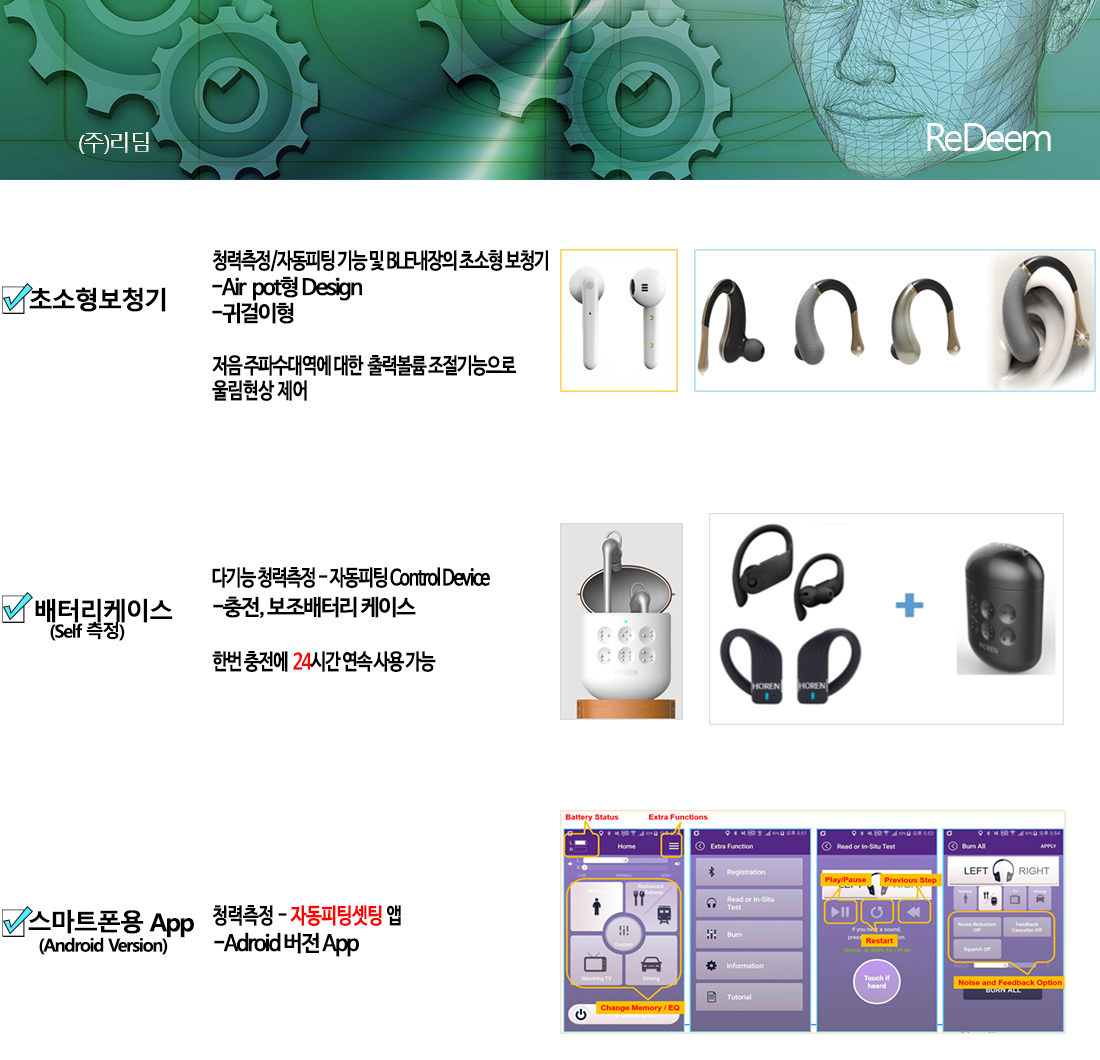
<style>
.page{position:relative;width:1100px;height:1060px;background:#ffffff}
.page>*{position:absolute;margin:0}
.t1{font:37.9px "MalgunGothic";letter-spacing:-0.075em;color:#fefefe}
.t2{font:22.3px "MalgunGothic";letter-spacing:-0.075em;color:#fefefe}
.t3{font:22px "NanumBarunGothicBold";letter-spacing:-0.075em;color:#000000;scale:0.81 1}
.t4{font:22px "NanumBarunGothicBold";letter-spacing:-0.075em;color:#000000}
.t5{font:25px "MalgunGothicBold";letter-spacing:-0.075em;color:#000000}
.t6{font:22px "NanumBarunGothicBold";letter-spacing:-0.025em;color:#000000;scale:0.81 1}
.t7{font:18px "MalgunGothicBold";letter-spacing:-0.075em;color:#000000}
.t8{font:22px "NanumBarunGothicBold";letter-spacing:-0.075em;color:#fc0505;scale:0.81 1}
.t9{font:22px "NanumBarunGothicBold";letter-spacing:-0.025em;color:#ff0101;scale:0.81 1}
</style>
<div class="page">
<p class="t1" style="left:927px;top:123px;width:124px;height:28px">ReDeem</p>
<p class="t2" style="left:79px;top:132px;width:70px;height:22px">(주)리딤</p>
<p class="t2" style="left:79px;top:132px;width:70px;height:22px">(주)리딤</p>
<p class="t3" style="left:212px;top:250px;width:336px;height:22px">청력측정/자동피팅 기능 및 BLE내장의 초소형 보청기</p>
<p class="t4" style="left:212px;top:276px;width:150px;height:25px">-Air  pot형 Design</p>
<p class="t5" style="left:29px;top:287px;width:137px;height:25px">초소형보청기</p>
<p class="t4" style="left:212px;top:302px;width:82px;height:22px">-귀걸이형</p>
<p class="t3" style="left:212px;top:355px;width:304px;height:21px">저음 주파수대역에 대한  출력볼륨 조절기능으로</p>
<p class="t6" style="left:212px;top:380px;width:95px;height:21px">울림현상 제어</p>
<p class="t3" style="left:212px;top:567px;width:278px;height:21px">다기능 청력측정 - 자동피팅 Control Device</p>
<p class="t5" style="left:35px;top:598px;width:138px;height:25px">배터리케이스</p>
<p class="t4" style="left:213px;top:596px;width:203px;height:22px">-충전, 보조배터리 케이스</p>
<p class="t7" style="left:50px;top:621px;width:75px;height:20px">(Self 측정)</p>
<p class="t3" style="left:212px;top:651px;width:224px;height:21px">한번 충전에  <span class="t8">24</span>시간 연속 사용 가능</p>
<p class="t6" style="left:212px;top:905px;width:189px;height:21px">청력측정 - <span class="t9">자동피팅셋팅</span> 앱</p>
<p class="t5" style="left:28px;top:909px;width:166px;height:29px">스마트폰용 App</p>
<p class="t7" style="left:39px;top:937px;width:129px;height:18px">(Android Version)</p>
<p class="t4" style="left:214px;top:932px;width:145px;height:25px">-Adroid 버전 App</p>
</div>
